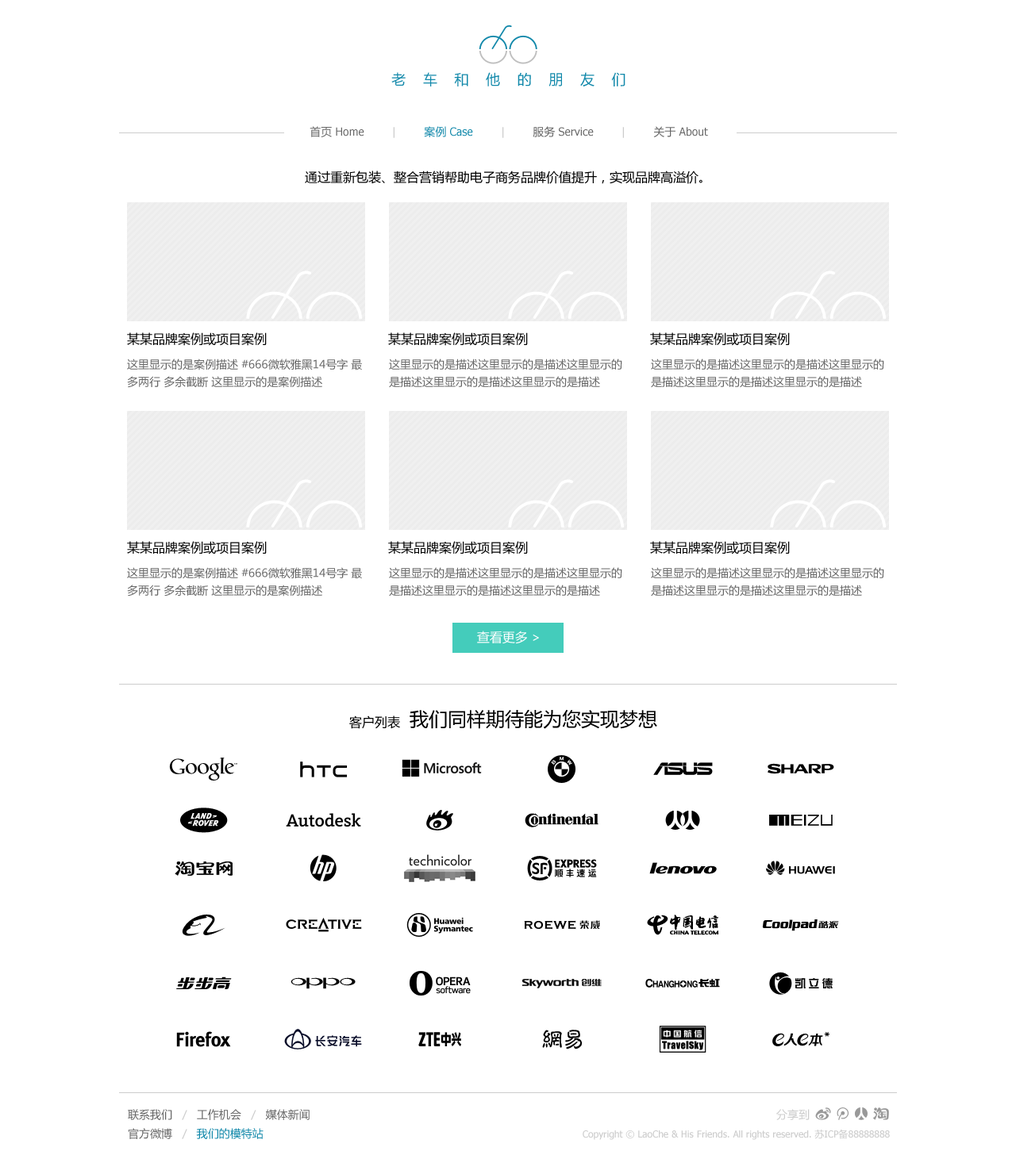
<style>
.page{position:relative;width:1016px;height:1174px;background:#ffffff}
.page>*{position:absolute;margin:0}
.t1{font:14.3px "MicrosoftYaHei";letter-spacing:1.2em;color:#1188aa}
.t2{font:11.1px "Tahoma";color:#666666}
.t3{font:11.1px "MicrosoftYaHei";color:#666666}
.t4{font:11.1px "Tahoma";color:#cccccc}
.t5{font:11.1px "MicrosoftYaHei";color:#1188aa}
.t6{font:11.1px "Tahoma";color:#1188aa}
.t7{font:12.7px "MicrosoftYaHei";color:#000000}
.t8{font:11.1px/17.5px "MicrosoftYaHei";color:#666666}
.t9{font:12.7px "MicrosoftYaHei";color:#ffffff}
.t10{font:19px "MicrosoftYaHei";color:#000000}
</style>
<div class="page">
<p class="t1" style="left:391px;top:72px;width:234px;height:14px">老车和他的朋友们</p>
<p class="t2" style="left:309px;top:126px;width:399px;height:12px"><span class="t3">首页</span> Home        <span class="t4">|        </span><span class="t5">案例</span><span class="t6"> Case        </span><span class="t4">|        </span><span class="t3">服务</span> Service        <span class="t4">|        </span><span class="t3">关于</span> About</p>
<p class="t7" style="left:305px;top:171px;width:397px;height:13px">通过重新包装、整合营销帮助电子商务品牌价值提升，实现品牌高溢价。</p>
<p class="t7" style="left:127px;top:332px;width:140px;height:14px">某某品牌案例或项目案例</p>
<p class="t7" style="left:388px;top:332px;width:140px;height:14px">某某品牌案例或项目案例</p>
<p class="t7" style="left:650px;top:332px;width:139px;height:14px">某某品牌案例或项目案例</p>
<p class="t8" style="left:127px;top:359px;width:235px;height:29px">这里显示的是案例描述 #666微软雅黑14号字 最多两行 多余截断 这里显示的是案例描述</p>
<p class="t8" style="left:389px;top:359px;width:233px;height:29px">这里显示的是描述这里显示的是描述这里显示的是描述这里显示的是描述这里显示的是描述</p>
<p class="t8" style="left:651px;top:359px;width:233px;height:29px">这里显示的是描述这里显示的是描述这里显示的是描述这里显示的是描述这里显示的是描述</p>
<p class="t7" style="left:127px;top:541px;width:140px;height:14px">某某品牌案例或项目案例</p>
<p class="t7" style="left:388px;top:541px;width:140px;height:14px">某某品牌案例或项目案例</p>
<p class="t7" style="left:650px;top:541px;width:139px;height:14px">某某品牌案例或项目案例</p>
<p class="t8" style="left:127px;top:567px;width:235px;height:30px">这里显示的是案例描述 #666微软雅黑14号字 最多两行 多余截断 这里显示的是案例描述</p>
<p class="t8" style="left:389px;top:567px;width:233px;height:30px">这里显示的是描述这里显示的是描述这里显示的是描述这里显示的是描述这里显示的是描述</p>
<p class="t8" style="left:651px;top:567px;width:233px;height:30px">这里显示的是描述这里显示的是描述这里显示的是描述这里显示的是描述这里显示的是描述</p>
<p class="t9" style="left:477px;top:631px;width:62px;height:13px">查看更多 &gt;</p>
<p class="t10" style="left:409px;top:709px;width:248px;height:20px">我们同样期待能为您实现梦想</p>
<p class="t7" style="left:349px;top:716px;width:51px;height:13px">客户列表</p>
</div>
